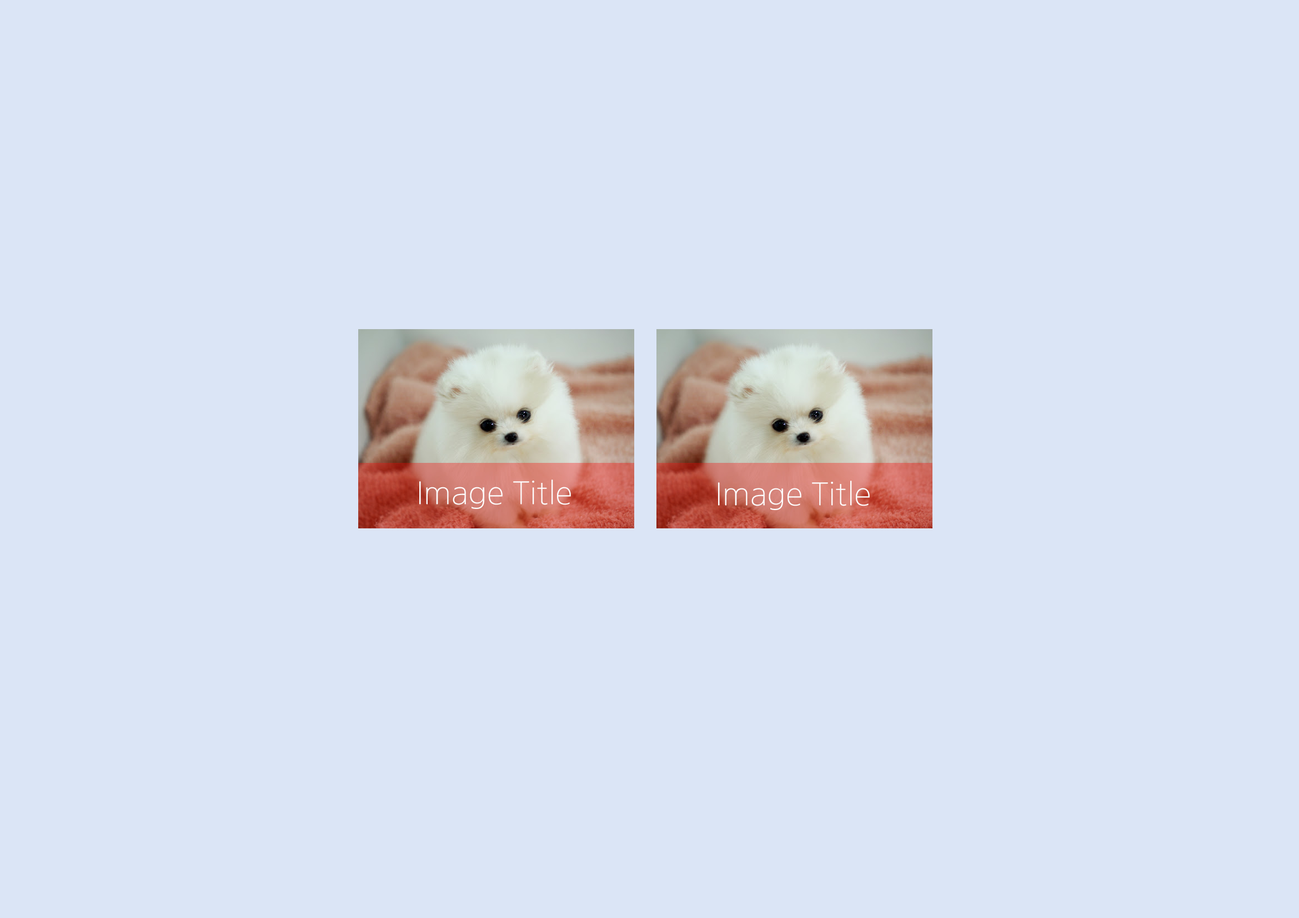
<style>
.page{position:relative;width:1299px;height:918px;background:#dbe5f6}
.page>*{position:absolute;margin:0}
.t1{font:30.8px "NanumGothicOTFLight";color:#ffffff}
</style>
<div class="page">
<p class="t1" style="left:419px;top:480px;width:152px;height:29px">Image Title</p>
<p class="t1" style="left:718px;top:481px;width:151px;height:29px">Image Title</p>
</div>
